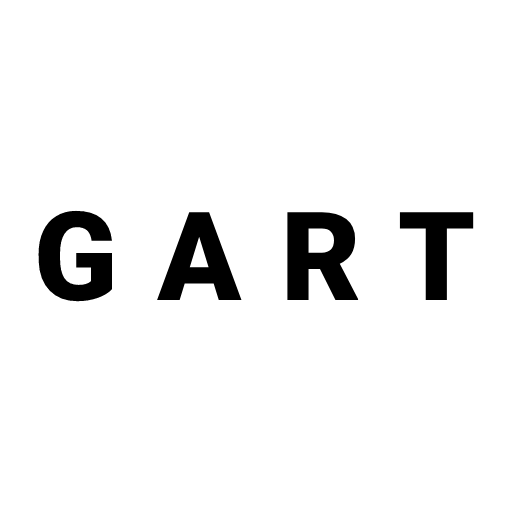
<style>
.page{position:relative;width:512px;height:512px;background:#ffffff}
.page>*{position:absolute;margin:0}
.t1{font:123.6px "Roboto-Black";letter-spacing:0.321em;color:#000000}
</style>
<div class="page">
<p class="t1" style="left:38px;top:210px;width:436px;height:92px">GART</p>
</div>
